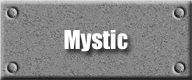
<style>
.page{position:relative;width:192px;height:80px}
.page>*{position:absolute;margin:0}
.t1{font:24px "Impact";color:#ffffff}
</style>
<div class="page">
<p class="t1" style="left:64px;top:30px;width:64px;height:22px">Mystic</p>
</div>
